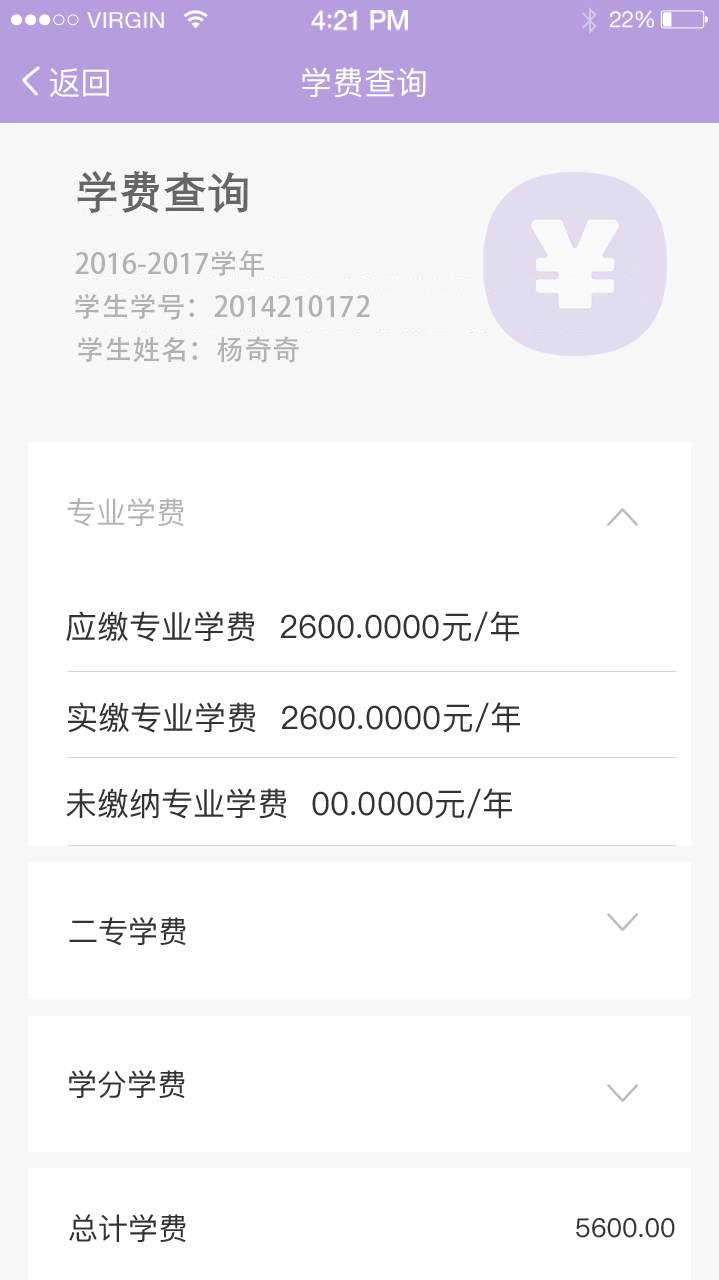
<style>
.page{position:relative;width:719px;height:1280px;background:#ffffff}
.page>*{position:absolute;margin:0}
.t1{font:22.5px "HelveticaNeue";letter-spacing:0.02em;color:#ffffff}
.t2{font:27px "HelveticaNeue-Medium";letter-spacing:-0.02em;color:#ffffff}
.t3{font:27px "Avenir-Medium";letter-spacing:-0.02em;color:#ffffff}
.t4{font:22.6px "HelveticaNeue";letter-spacing:-0.02em;color:#ffffff}
.t5{font:32px "PingFangSC-Medium";color:#ffffff}
.t6{font:44px "DengXian-Bold";color:#666666}
.t7{font:28px "AdobeHeitiStd-Regular";color:#b2b2b2}
.t8{font:30px "PingFangSC-Medium";color:#b2b2b2}
.t9{font:32px "PingFangSC-Medium";color:#333333}
.t10{font:30px "PingFangSC-Medium";color:#333333}
.t11{font:26px "PingFangSC-Medium";color:#333333}
</style>
<div class="page">
<p class="t1" style="left:86px;top:12px;width:78px;height:16px">VIRGIN</p>
<p class="t2" style="left:311px;top:10px;width:97px;height:21px">4<span class="t3">:</span>21 PM</p>
<p class="t4" style="left:610px;top:10px;width:44px;height:18px">22%</p>
<p class="t5" style="left:50px;top:68px;width:59px;height:30px">返回</p>
<p class="t5" style="left:302px;top:67px;width:124px;height:31px">学费查询</p>
<p class="t6" style="left:77px;top:171px;width:171px;height:42px">学费查询</p>
<p class="t7" style="left:75px;top:250px;width:190px;height:27px">2016-2017学年</p>
<p class="t7" style="left:75px;top:293px;width:295px;height:27px">学生学号：2014210172</p>
<p class="t7" style="left:78px;top:336px;width:221px;height:27px">学生姓名：杨奇奇</p>
<p class="t8" style="left:67px;top:498px;width:117px;height:29px">专业学费</p>
<p class="t9" style="left:66px;top:611px;width:453px;height:31px">应缴专业学费  2600.0000元/年</p>
<p class="t9" style="left:68px;top:702px;width:452px;height:31px">实缴专业学费  2600.0000元/年</p>
<p class="t9" style="left:66px;top:788px;width:446px;height:31px">未缴纳专业学费  00.0000元/年</p>
<p class="t10" style="left:69px;top:917px;width:117px;height:29px">二专学费</p>
<p class="t10" style="left:69px;top:1070px;width:116px;height:28px">学分学费</p>
<p class="t10" style="left:69px;top:1214px;width:117px;height:28px">总计学费</p>
<p class="t11" style="left:576px;top:1217px;width:99px;height:21px">5600.00</p>
</div>
